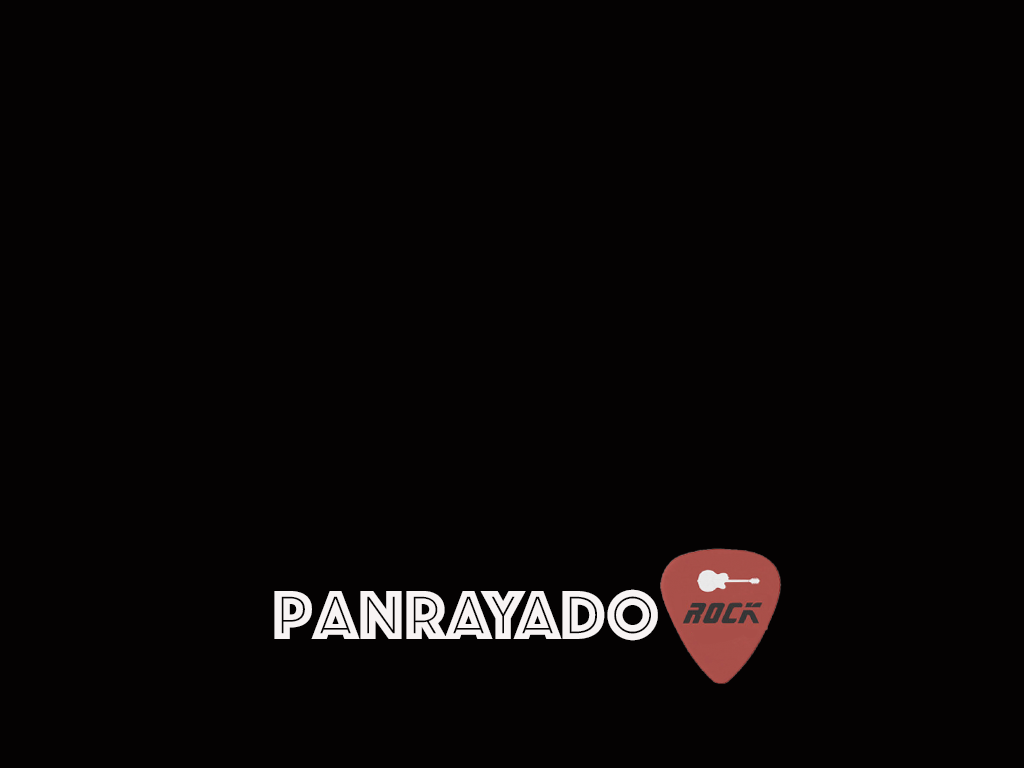
<style>
.page{position:relative;width:1024px;height:768px;background:#040202}
.page>*{position:absolute;margin:0}
.t1{font:72px "Phosphate-Inline";color:#f8f4f4}
</style>
<div class="page">
<p class="t1" style="left:274px;top:589px;width:384px;height:52px">Panrayado</p>
</div>
